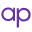
<style>
.page{position:relative;width:32px;height:32px;background:#ffffff}
.page>*{position:absolute;margin:0}
.t1{font:32.1px "JosefinSans";color:#663399}
</style>
<div class="page">
<p class="t1" style="left:1px;top:7px;width:14px;height:14px">a</p>
<p class="t1" style="left:16px;top:7px;width:15px;height:21px">p</p>
</div>
